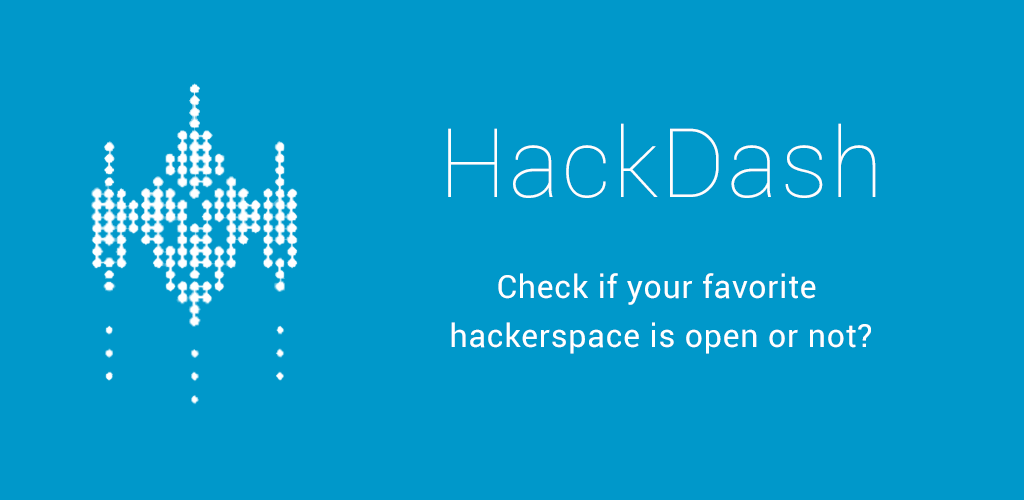
<style>
.page{position:relative;width:1024px;height:500px;background:#0098ca}
.page>*{position:absolute;margin:0}
.t1{font:96px "Roboto-Thin";letter-spacing:0.025em;color:#fefefe}
.t2{font:32px/40px "Roboto-Regular";letter-spacing:0.025em;color:#ffffff}
</style>
<div class="page">
<p class="t1" style="left:448px;top:123px;width:428px;height:75px">HackDash</p>
<p class="t2" style="left:451px;top:273px;width:420px;height:81px;text-align:center">Check if your favorite <br>hackerspace is open or not?</p>
</div>
